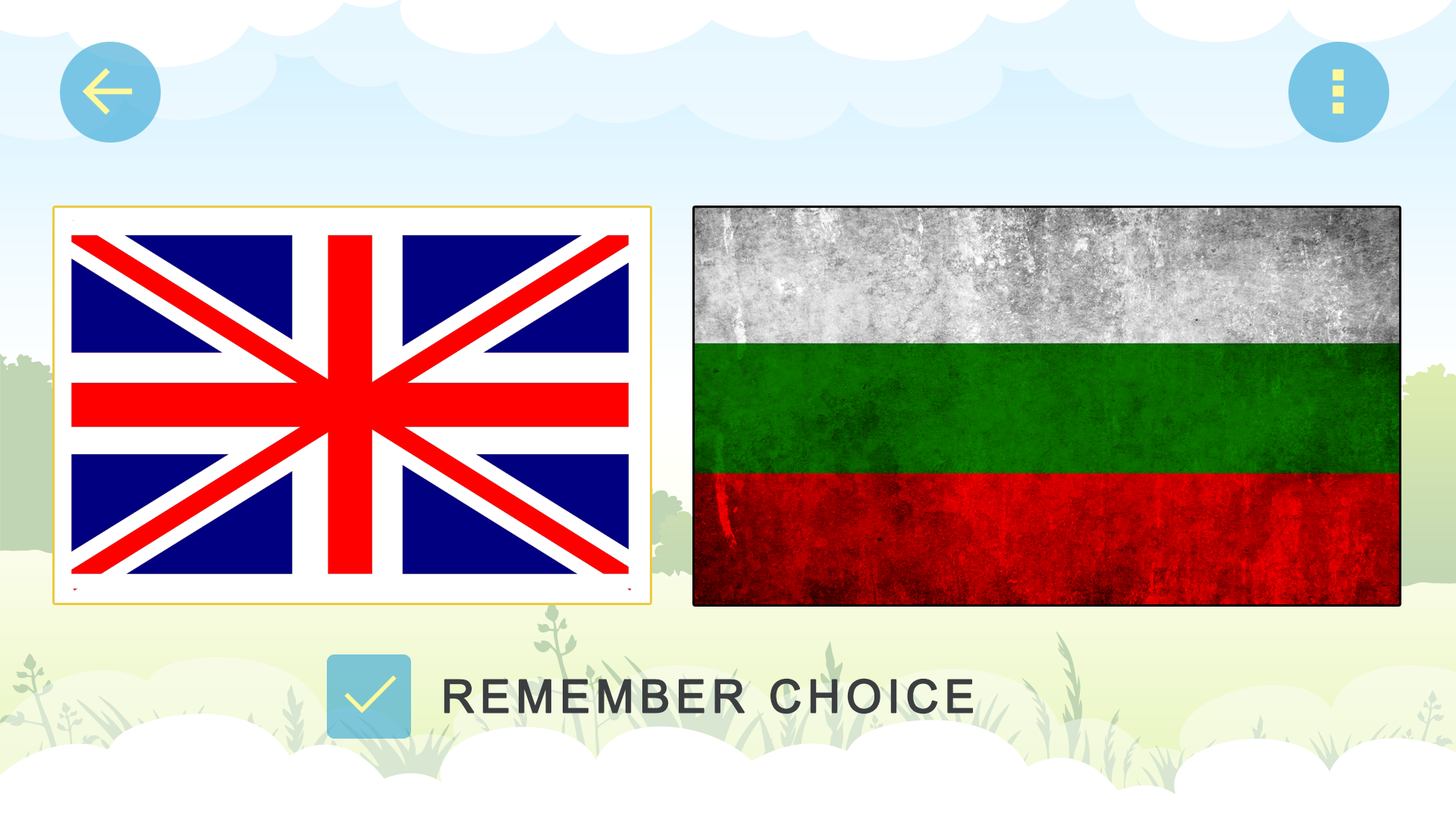
<style>
.page{position:relative;width:1456px;height:819px;background:#ffffff}
.page>*{position:absolute;margin:0}
.t1{font:45.5px "ArialMT";letter-spacing:0.1em;color:#3b3e40;font-weight:bold}
</style>
<div class="page">
<p class="t1" style="left:444px;top:678px;width:529px;height:36px">REMEMBER CHOICE</p>
</div>
